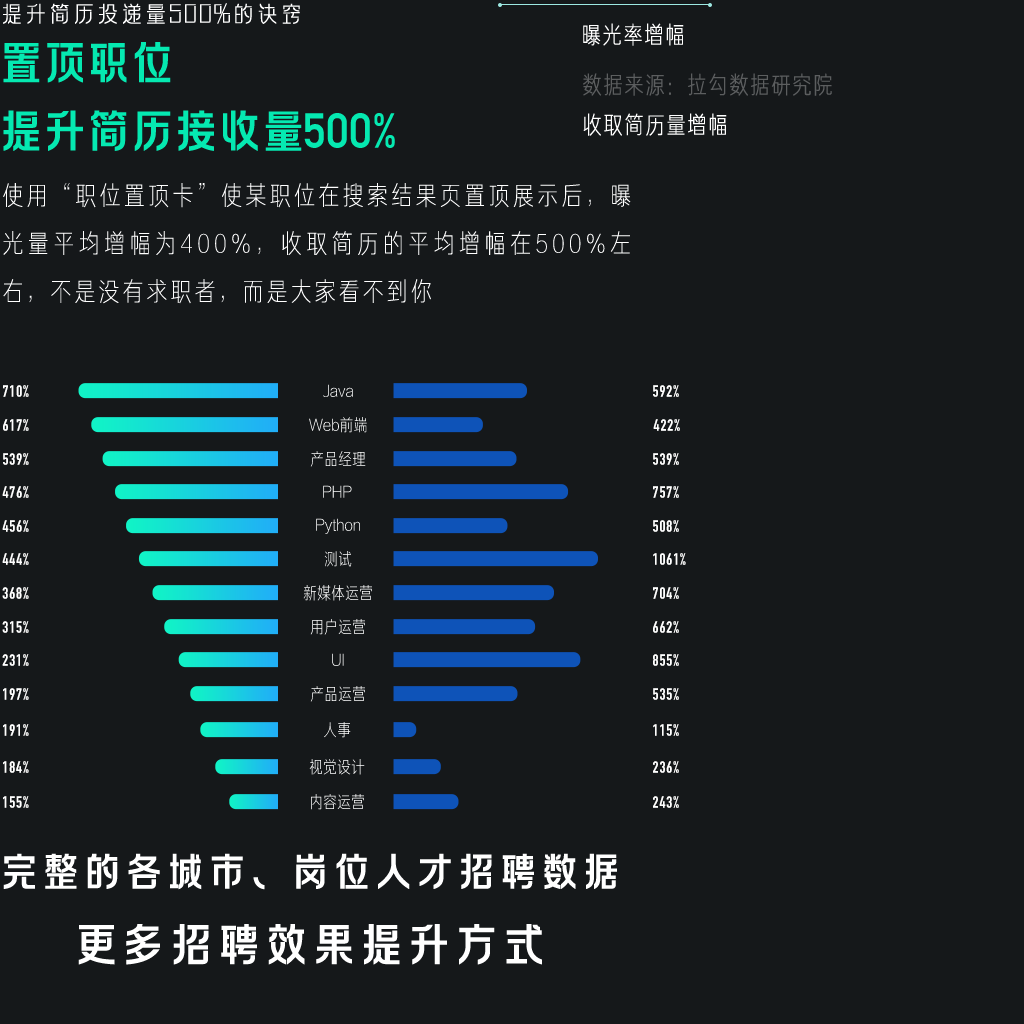
<style>
.page{position:relative;width:1024px;height:1024px;background:#15181a}
.page>*{position:absolute;margin:0}
.t1{font:24px "FZLAGBTTS_XI--GB1-0";color:#ffffff;text-transform:uppercase}
.t2{font:24px "FZJUNH_XIJW--GB1-0";letter-spacing:0.05em;color:#ffffff;text-transform:uppercase}
.t3{font:48px/34px "FZLAGBTTS_ZHONG--GB1-0";letter-spacing:-0.09em;color:#05e9b1;text-transform:uppercase}
.t4{font:48px/34px "DINAlternate-Bold";color:#05e9b1;text-transform:uppercase}
.t5{font:24px "FZJUNH_XIJW--GB1-0";letter-spacing:0.05em;color:#5c5e5f;text-transform:uppercase}
.t6{font:26px/48px "FZJUNH_XIANJW--GB1-0";letter-spacing:0.1em;color:#ffffff}
.t7{font:16px "DINCondensed-Bold";letter-spacing:0.06em;color:#ffffff}
.t8{font:17px "FZJUNH_XIJW--GB1-0";color:#ffffff}
.t9{font:17px "FZJUNH_XIJW--GB1-0"}
.t10{font:42px "FZLAGBTTS_ZHONG--GB1-0";letter-spacing:-0.01em;color:#ffffff;text-transform:uppercase}
.t11{font:48px "FZLAGBTTS_ZHONG--GB1-0";letter-spacing:-0.01em;color:#ffffff;text-transform:uppercase}
</style>
<div class="page">
<p class="t1" style="left:3px;top:3px;width:297px;height:21px">提升简历投递量500%的诀窍</p>
<p class="t2" style="left:583px;top:23px;width:101px;height:23px">曝光率增幅</p>
<p class="t3" style="left:3px;top:42px;width:392px;height:109px">置顶职位<br><br>提升简历接收量<span class="t4">500%</span></p>
<p class="t5" style="left:583px;top:73px;width:249px;height:23px">数据来源：拉勾数据研究院</p>
<p class="t2" style="left:583px;top:113px;width:144px;height:23px">收取简历量增幅</p>
<p class="t6" style="left:3px;top:183px;width:628px;height:121px;text-align:justify">使用“职位置顶卡”使某职位在搜索结果页置顶展示后，曝光量平均增幅为400%，收取简历的平均增幅在500%左右，不是没有求职者，而是大家看不到你</p>
<p class="t7" style="left:3px;top:385px;width:26px;height:12px">710%</p>
<p class="t8" style="left:323px;top:384px;width:30px;height:13px">Java</p>
<p class="t7" style="left:653px;top:385px;width:26px;height:12px">592%</p>
<p class="t7" style="left:3px;top:419px;width:26px;height:12px">617%</p>
<p class="t8" style="left:309px;top:417px;width:58px;height:16px">Web前端</p>
<p class="t7" style="left:653px;top:419px;width:27px;height:12px">422%</p>
<p class="t7" style="left:3px;top:453px;width:26px;height:12px">539%</p>
<p class="t9" style="left:310px;top:451px;width:56px;height:16px">产品经理</p>
<p class="t7" style="left:653px;top:453px;width:26px;height:12px">539%</p>
<p class="t7" style="left:2px;top:486px;width:27px;height:12px">476%</p>
<p class="t9" style="left:323px;top:485px;width:29px;height:13px">PHP</p>
<p class="t7" style="left:653px;top:486px;width:26px;height:12px">757%</p>
<p class="t7" style="left:2px;top:520px;width:27px;height:12px">456%</p>
<p class="t8" style="left:316px;top:518px;width:44px;height:16px">Python</p>
<p class="t7" style="left:653px;top:520px;width:26px;height:12px">508%</p>
<p class="t7" style="left:2px;top:553px;width:27px;height:12px">444%</p>
<p class="t9" style="left:324px;top:551px;width:28px;height:16px">测试</p>
<p class="t7" style="left:653px;top:553px;width:33px;height:12px">1061%</p>
<p class="t7" style="left:2px;top:587px;width:27px;height:12px">368%</p>
<p class="t8" style="left:303px;top:585px;width:69px;height:16px">新媒体运营</p>
<p class="t7" style="left:653px;top:587px;width:26px;height:12px">704%</p>
<p class="t7" style="left:2px;top:621px;width:27px;height:12px">315%</p>
<p class="t9" style="left:310px;top:619px;width:55px;height:16px">用户运营</p>
<p class="t7" style="left:653px;top:621px;width:26px;height:12px">662%</p>
<p class="t7" style="left:2px;top:654px;width:27px;height:12px">231%</p>
<p class="t9" style="left:332px;top:653px;width:12px;height:13px">UI</p>
<p class="t7" style="left:653px;top:654px;width:26px;height:12px">855%</p>
<p class="t7" style="left:3px;top:688px;width:26px;height:12px">197%</p>
<p class="t9" style="left:310px;top:686px;width:55px;height:16px">产品运营</p>
<p class="t7" style="left:653px;top:688px;width:26px;height:12px">535%</p>
<p class="t7" style="left:3px;top:724px;width:26px;height:12px">191%</p>
<p class="t9" style="left:324px;top:722px;width:27px;height:16px">人事</p>
<p class="t7" style="left:653px;top:724px;width:26px;height:12px">115%</p>
<p class="t7" style="left:3px;top:761px;width:26px;height:12px">184%</p>
<p class="t9" style="left:309px;top:759px;width:56px;height:16px">视觉设计</p>
<p class="t7" style="left:653px;top:761px;width:26px;height:12px">236%</p>
<p class="t7" style="left:3px;top:796px;width:26px;height:12px">155%</p>
<p class="t9" style="left:311px;top:794px;width:53px;height:16px">内容运营</p>
<p class="t7" style="left:653px;top:796px;width:26px;height:12px">243%</p>
<p class="t10" style="left:3px;top:853px;width:614px;height:37px">完整的各城市、岗位人才招聘数据</p>
<p class="t11" style="left:78px;top:924px;width:464px;height:41px">更多招聘效果提升方式</p>
</div>
